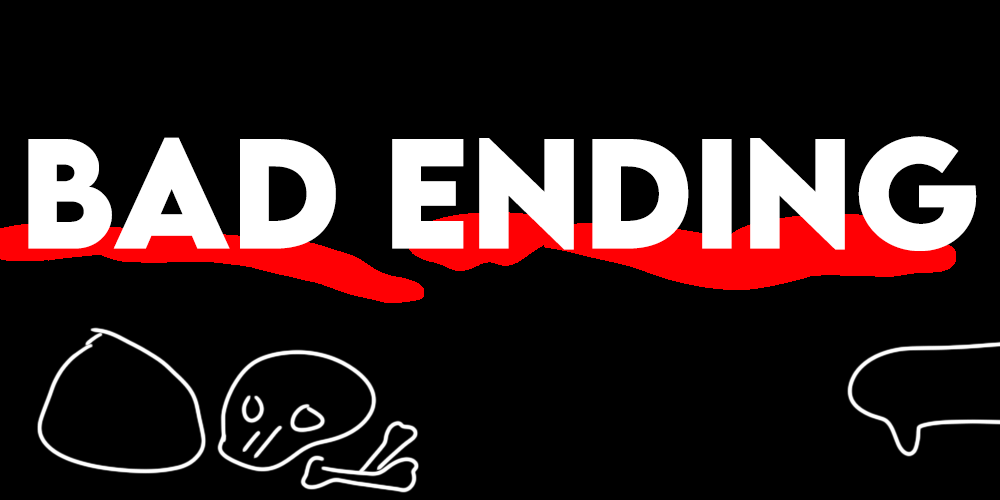
<style>
.page{position:relative;width:1000px;height:500px;background:#000000}
.page>*{position:absolute;margin:0}
.t1{font:138.8px "LEMONMILK-Bold";color:#ffffff}
</style>
<div class="page">
<p class="t1" style="left:28px;top:136px;width:949px;height:115px">BAD ENDING</p>
</div>
